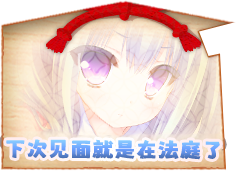
<style>
.page{position:relative;width:236px;height:171px}
.page>*{position:absolute;margin:0}
.t1{font:21.3px "MaokenAssortedSans";font-weight:bold}
</style>
<div class="page">
<p class="t1" style="left:6px;top:139px;width:214px;height:21px">下次见面就是在法庭了</p>
</div>
